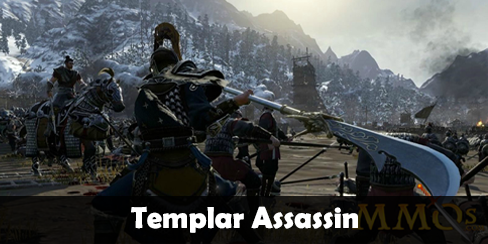
<style>
.page{position:relative;width:488px;height:244px}
.page>*{position:absolute;margin:0}
.t1{font:30.3px "BerlinSansFBDemi-Bold";color:#ffffff}
</style>
<div class="page">
<p class="t1" style="left:131px;top:206px;width:227px;height:27px">Templar Assassin</p>
</div>
